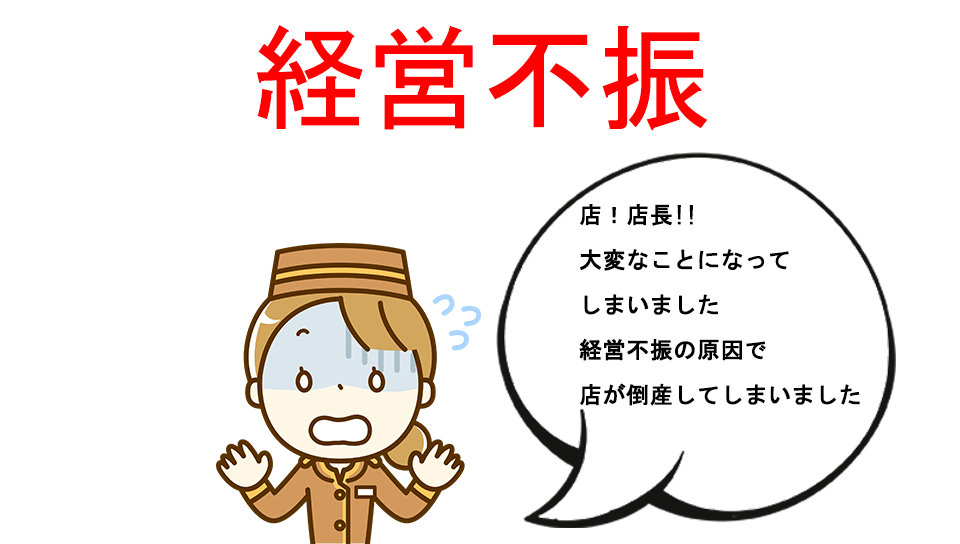
<style>
.page{position:relative;width:960px;height:544px;background:#ffffff}
.page>*{position:absolute;margin:0}
.t1{font:23px/45px "MS-Gothic";color:#000000;font-weight:bold}
</style>
<div class="page">
<p class="t1" style="left:579px;top:204px;width:281px;height:202px">店！店長!!<br>大変なことになって<br>しまいました<br>経営不振の原因で<br>店が倒産してしまいました</p>
</div>
